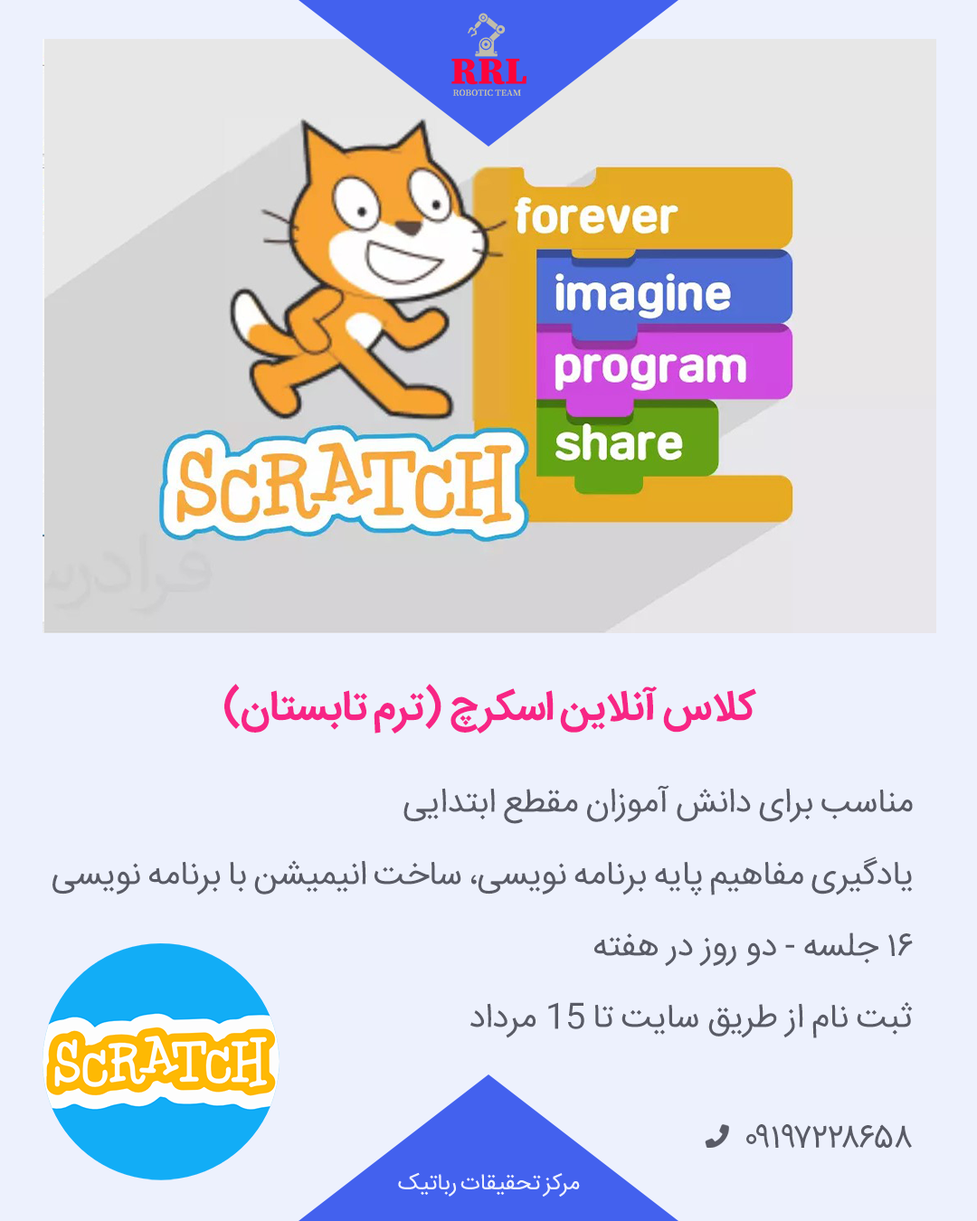
<style>
.page{position:relative;width:977px;height:1221px;background:#edf1fd}
.page>*{position:absolute;margin:0}
.t1{font:41.4px "IRANSans-Bold";letter-spacing:-0.02em;color:#f72585}
.t2{font:33.9px "IRANSans";letter-spacing:-0.02em;color:#595b66}
.t3{font:22.9px "IRANSans";letter-spacing:-0.02em;color:#edf1fd}
</style>
<div class="page">
<p class="t1" style="left:224px;top:684px;width:532px;height:49px">کلاس آنلاین اسکرچ (ترم تابستان)</p>
<p class="t2" style="left:403px;top:785px;width:509px;height:39px">مناسب برای دانش آموزان مقطع ابتدایی</p>
<p class="t2" style="left:52px;top:856px;width:860px;height:40px">یادگیری مفاهیم پایه برنامه نویسی، ساخت انیمیشن با برنامه نویسی</p>
<p class="t2" style="left:594px;top:932px;width:318px;height:35px">16 جلسه - دو روز در هفته</p>
<p class="t2" style="left:470px;top:1002px;width:442px;height:36px">ثبت نام از طریق سایت تا 15 مرداد</p>
<p class="t2" style="left:746px;top:1124px;width:166px;height:25px">09197228658</p>
<p class="t3" style="left:398px;top:1172px;width:182px;height:24px">مرکز تحقیقات رباتیک</p>
</div>
